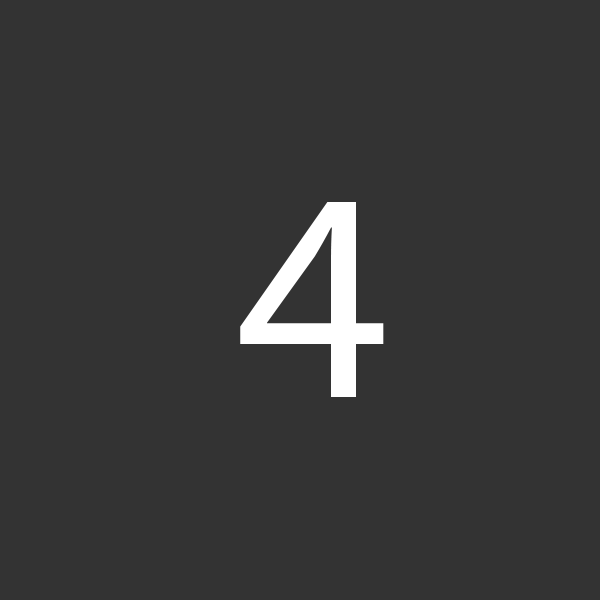
<style>
.page{position:relative;width:600px;height:600px;background:#333333}
.page>*{position:absolute;margin:0}
.t1{font:300px "MyriadPro-Regular";color:#ffffff}
</style>
<div class="page">
<p class="t1" style="left:240px;top:202px;width:144px;height:195px">4</p>
</div>
